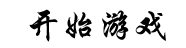
<style>
.page{position:relative;width:186px;height:48px;background:#ffffff}
.page>*{position:absolute;margin:0}
.t1{font:36px "STXingkai";color:#000000}
</style>
<div class="page">
<p class="t1" style="left:29px;top:9px;width:137px;height:33px">开始游戏</p>
</div>
